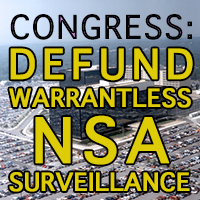
<style>
.page{position:relative;width:200px;height:200px}
.page>*{position:absolute;margin:0}
.t1{font:32px "Thonburi-Bold";letter-spacing:0.04em;color:#000000}
.t2{font:24px "Thonburi-Bold";color:#decc06;font-weight:bold}
.t3{font:40px "Thonburi-Bold";letter-spacing:0.12em;color:#decc06;font-weight:bold}
.t4{font:60px/57px "Thonburi-Bold";letter-spacing:0.1em;color:#decc06;font-weight:bold}
</style>
<div class="page">
<p class="t1" style="left:10px;top:14px;width:182px;height:26px">CONGRESS:</p>
<p class="t2" style="left:9px;top:48px;width:184px;height:144px"><span class="t3">DEFUND<br></span>WARRANTLESS<br>      <span class="t4">NSA<br></span>SURVEILLANCE</p>
</div>
